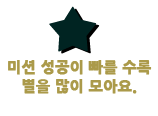
<style>
.page{position:relative;width:158px;height:116px;background:#ffffff}
.page>*{position:absolute;margin:0}
.t1{font:15px/19px "NanumGothicExtraBold";color:#ab9a4a;font-weight:bold}
</style>
<div class="page">
<p class="t1" style="left:8px;top:60px;width:144px;height:34px;text-align:center">미션 성공이 빠를 수록<br>별을 많이 모아요.</p>
</div>
